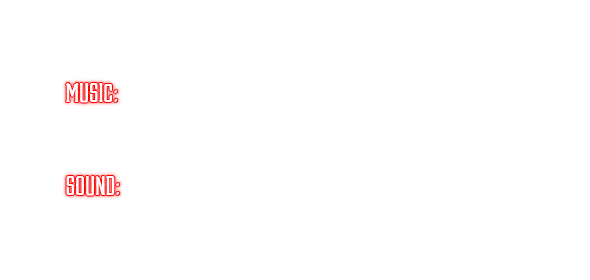
<style>
.page{position:relative;width:590px;height:280px;background:#ffffff}
.page>*{position:absolute;margin:0}
.t1{font:25px "TUVBenchmark";color:#ffffff}
</style>
<div class="page">
<p class="t1" style="left:66px;top:83px;width:52px;height:20px">MUSIC:</p>
<p class="t1" style="left:66px;top:176px;width:54px;height:20px">SOUND:</p>
</div>
